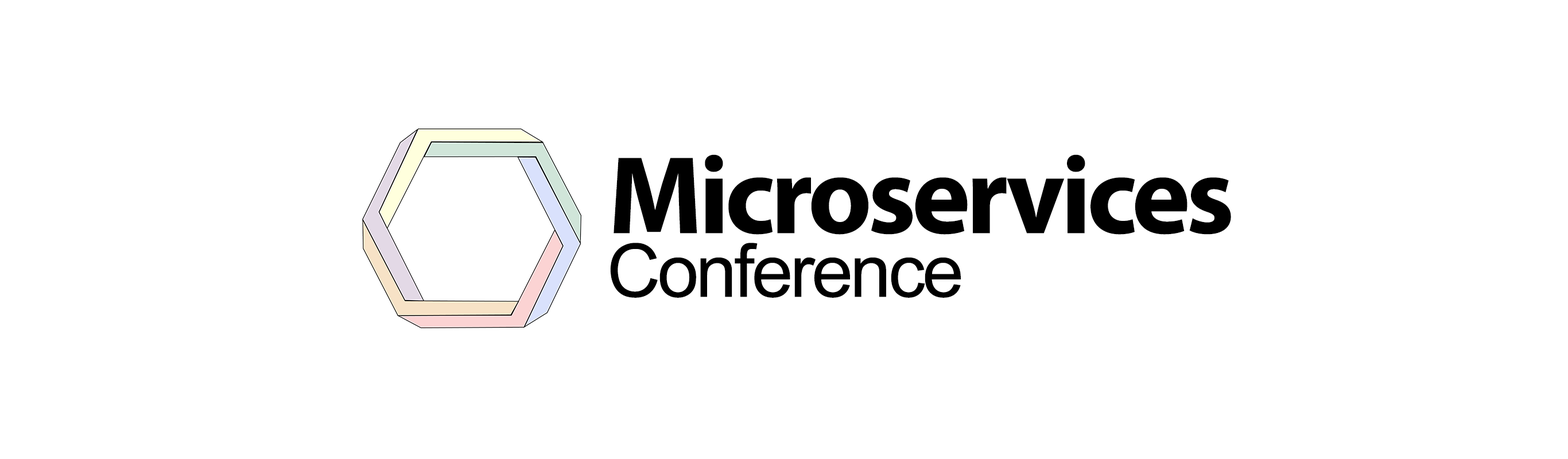
<style>
.page{position:relative;width:1568px;height:459px;background:#ffffff}
.page>*{position:absolute;margin:0}
.t1{font:111.6px "MyriadPro-Bold";letter-spacing:-0.04em;color:#000000}
.t2{font:74.2px "ArialMT";letter-spacing:-0.04em;color:#000000}
</style>
<div class="page">
<p class="t1" style="left:614px;top:154px;width:617px;height:81px">Microservices</p>
<p class="t2" style="left:610px;top:243px;width:351px;height:55px">Conference</p>
</div>
